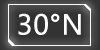
<style>
.page{position:relative;width:100px;height:50px}
.page>*{position:absolute;margin:0}
.t1{font:27px "MicrosoftYaHei";letter-spacing:0.025em;color:#ffffff}
</style>
<div class="page">
<p class="t1" style="left:18px;top:13px;width:63px;height:22px">30°N</p>
</div>
